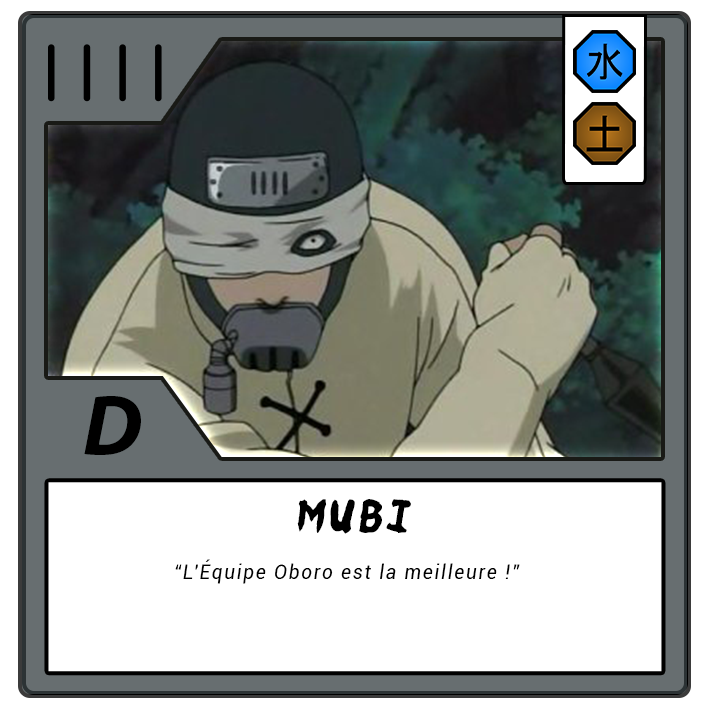
<style>
.page{position:relative;width:709px;height:709px;background:#ffffff}
.page>*{position:absolute;margin:0}
.t1{font:87.5px "MyriadPro-BoldIt";letter-spacing:-0.12em;color:#000000}
.t2{font:37.5px "Ninja-Naruto";letter-spacing:0.1em;color:#000000}
.t3{font:20.8px "Roboto-Italic";letter-spacing:0.1em;color:#000000;scale:0.9 1}
</style>
<div class="page">
<p class="t1" style="left:84px;top:396px;width:57px;height:59px">D</p>
<p class="t2" style="left:297px;top:499px;width:114px;height:35px">Mubi</p>
<p class="t3" style="left:175px;top:559px;width:345px;height:25px">“L'Équipe Oboro est la meilleure !”</p>
</div>
